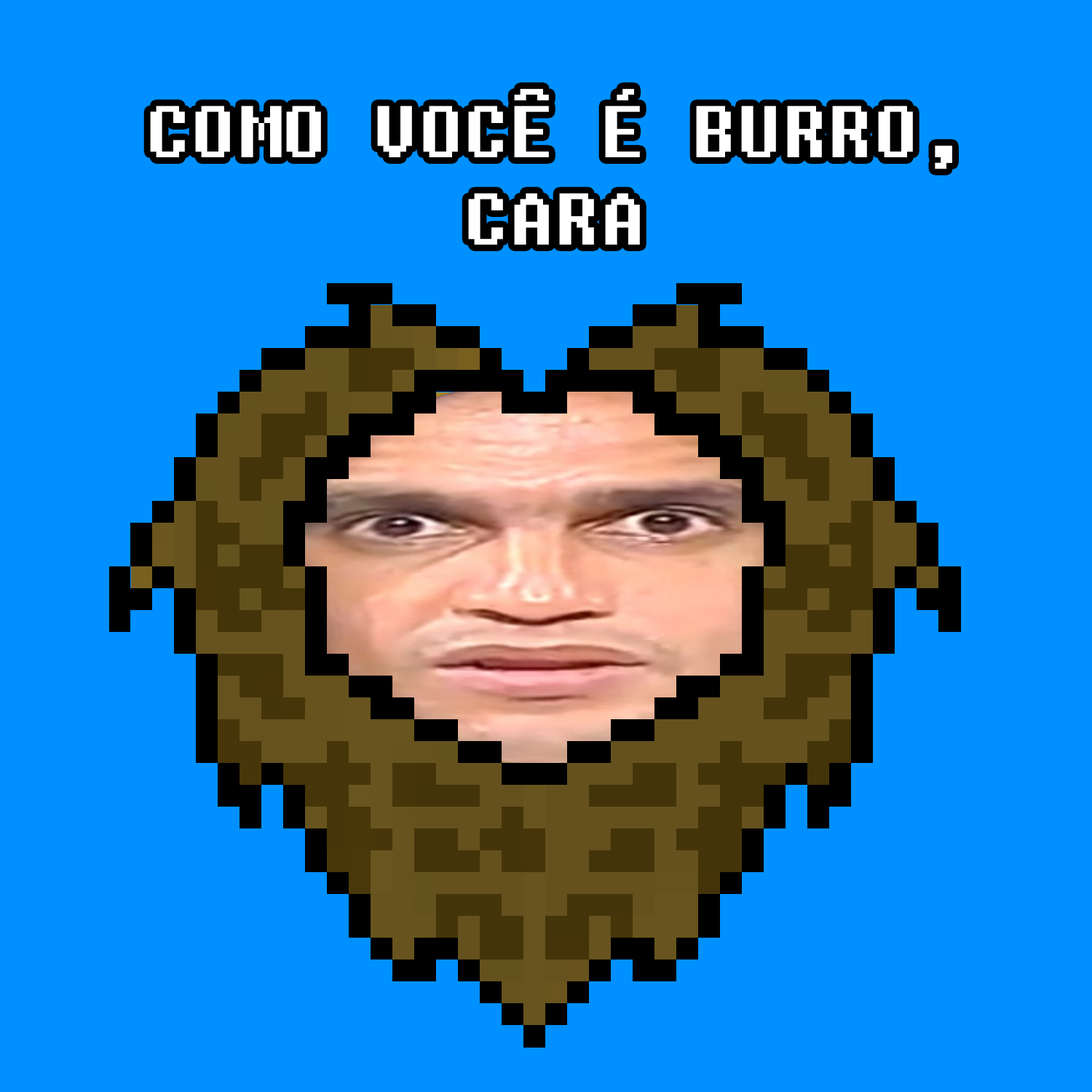
<style>
.page{position:relative;width:1092px;height:1092px;background:#0090ff}
.page>*{position:absolute;margin:0}
.t1{font:72.8px "Fixedsys";color:#ffffff}
</style>
<div class="page">
<p class="t1" style="left:150px;top:89px;width:802px;height:156px;text-align:center">COMO VOCÊ É BURRO, CARA</p>
</div>
